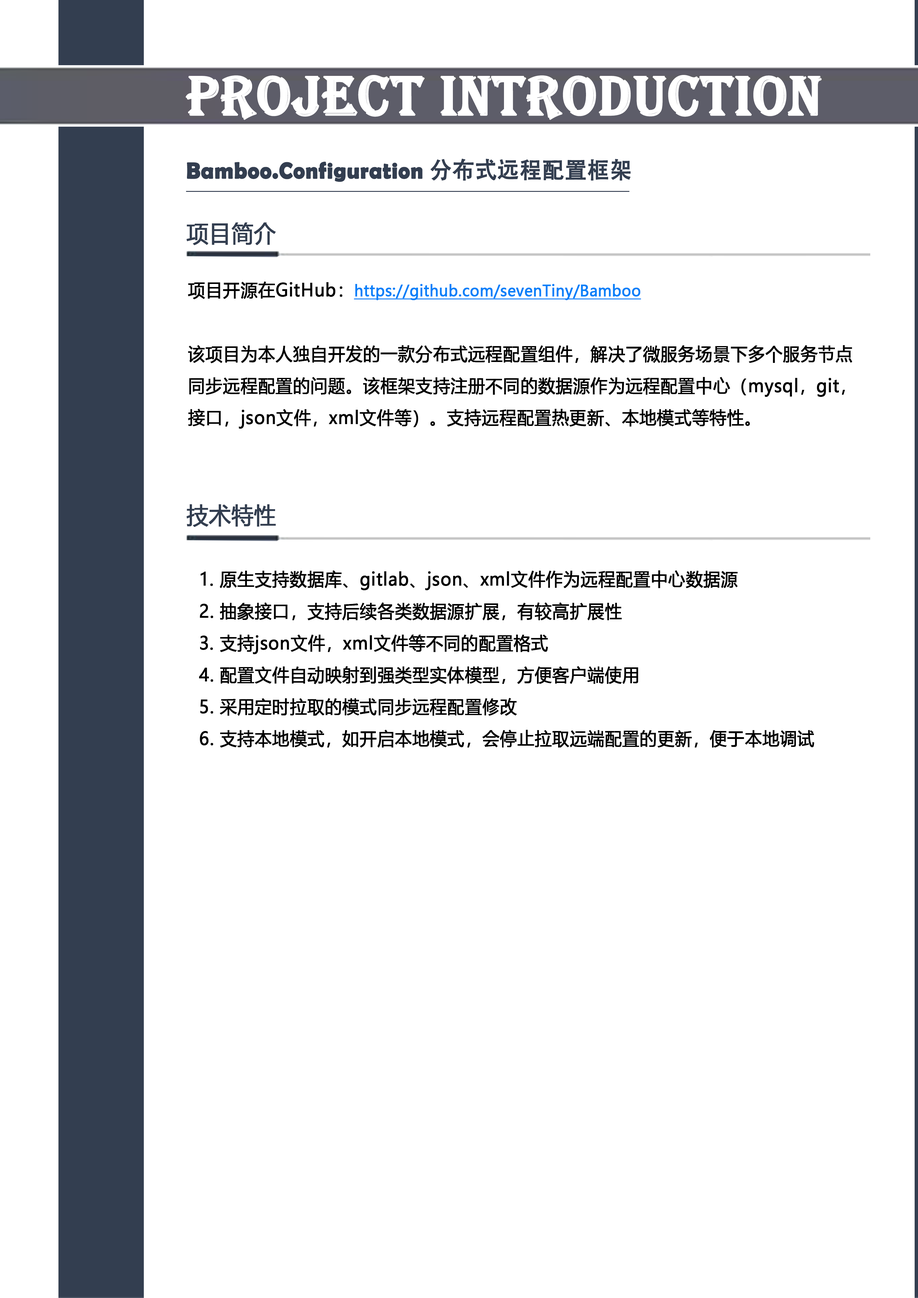
<style>
.page{position:relative;width:918px;height:1298px;background:#ffffff}
.page>*{position:absolute;margin:0}
.t1{font:57.4px "Algerian";letter-spacing:0.005em;color:#ffffff;font-weight:bold;scale:0.95 1}
.t2{font:23px "BerlinSansFBDemi-Bold";letter-spacing:0.005em;color:#333e50;font-weight:bold;scale:0.95 1}
.t3{font:23px "AdobeHeitiStd-Regular";letter-spacing:0.005em;color:#333e50;font-weight:bold;scale:0.95 1}
.t4{font:23px "MicrosoftYaHei";letter-spacing:0.005em;color:#333e50;font-weight:bold;scale:0.95 1}
.t5{font:17.9px/31.9px "MicrosoftYaHei";letter-spacing:0.005em;color:#000000;font-weight:bold;scale:0.95 1}
.t6{font:15.3px/28.1px "MicrosoftYaHei";letter-spacing:0.005em;color:#087ff9;font-weight:bold;text-decoration:underline;scale:0.95 1}
</style>
<div class="page">
<p class="t1" style="left:185px;top:75px;width:637px;height:45px">PROJECT INTRODUCTION</p>
<p class="t2" style="left:187px;top:159px;width:444px;height:23px">Bamboo.Configuration <span class="t3">分布式远程配置框架</span></p>
<p class="t4" style="left:186px;top:223px;width:90px;height:22px">项目简介</p>
<p class="t5" style="left:188px;top:282px;width:665px;height:147px">项目开源在GitHub：<span class="t6">https://github.com/sevenTiny/Bamboo<br></span><br>该项目为本人独自开发的一款分布式远程配置组件，解决了微服务场景下多个服务节点同步远程配置的问题。该框架支持注册不同的数据源作为远程配置中心（mysql，git，接口，json文件，xml文件等）。支持远程配置热更新、本地模式等特性。</p>
<p class="t4" style="left:186px;top:504px;width:90px;height:23px">技术特性</p>
<p class="t5" style="left:199px;top:571px;width:616px;height:177px">1. 原生支持数据库、gitlab、json、xml文件作为远程配置中心数据源<br>  2. 抽象接口，支持后续各类数据源扩展，有较高扩展性<br> 3. 支持json文件，xml文件等不同的配置格式<br>  4. 配置文件自动映射到强类型实体模型，方便客户端使用<br>  5. 采用定时拉取的模式同步远程配置修改<br>  6. 支持本地模式，如开启本地模式，会停止拉取远端配置的更新，便于本地调试</p>
</div>
